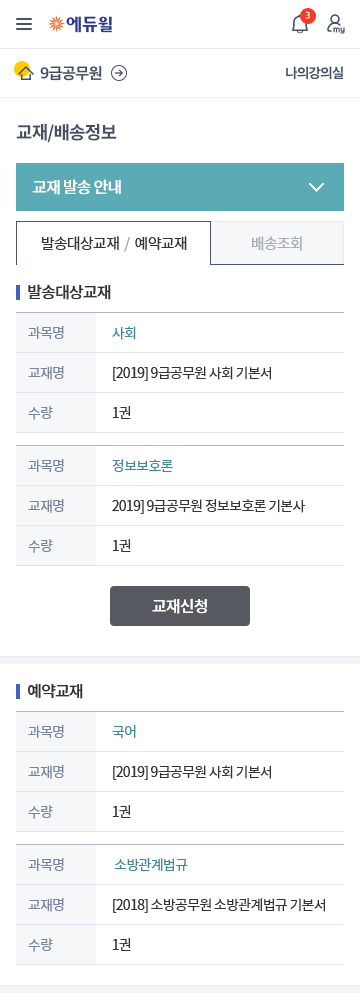
<style>
.page{position:relative;width:360px;height:993px;background:#ffffff}
.page>*{position:absolute;margin:0}
.t1{font:18px "NotoSansCJKkr-Bold";letter-spacing:-0.05em;color:#454f63}
.t2{font:16px "NotoSansCJKkr-Medium";letter-spacing:-0.05em;color:#ffffff}
.t3{font:15px "NotoSansCJKkr-Regular";letter-spacing:-0.05em;color:#333333}
.t4{font:15px "NotoSansCJKkr-Regular";letter-spacing:-0.05em;color:#aaaaaa}
.t5{font:15px "NotoSansCJKkr-Regular";letter-spacing:-0.05em;color:#a4acb5}
.t6{font:16px "NotoSansCJKkr-Medium";letter-spacing:-0.05em;color:#333333}
.t7{font:14px/40px "NotoSansCJKkr-Regular";letter-spacing:-0.05em;color:#78849e}
.t8{font:14px/40px "NotoSansCJKkr-Regular";letter-spacing:-0.05em;color:#333333}
.t9{font:14px/40px "NotoSansCJKkr-Regular";letter-spacing:-0.05em;color:#3f8b95}
</style>
<div class="page">
<p class="t1" style="left:16px;top:123px;width:101px;height:20px">교재/배송정보</p>
<p class="t2" style="left:32px;top:179px;width:89px;height:16px">교재 발송 안내</p>
<p class="t3" style="left:42px;top:236px;width:145px;height:16px">발송대상교재  <span class="t4">/</span>  예약교재</p>
<p class="t5" style="left:252px;top:236px;width:50px;height:15px">배송조회</p>
<p class="t6" style="left:28px;top:284px;width:83px;height:16px">발송대상교재</p>
<p class="t7" style="left:28px;top:326px;width:36px;height:94px">과목명<br>교재명<br>수량</p>
<p class="t8" style="left:112px;top:326px;width:159px;height:93px"><span class="t9">사회</span><br>[2019] 9급공무원 사회 기본서<br>1권</p>
<p class="t7" style="left:28px;top:459px;width:36px;height:94px">과목명<br>교재명<br>수량</p>
<p class="t8" style="left:112px;top:459px;width:193px;height:93px"><span class="t9">정보보호론<br></span>2019] 9급공무원 정보보호론 기본사<br>1권</p>
<p class="t2" style="left:152px;top:598px;width:55px;height:16px">교재신청</p>
<p class="t6" style="left:28px;top:684px;width:55px;height:15px">예약교재</p>
<p class="t7" style="left:28px;top:725px;width:36px;height:94px">과목명<br>교재명<br>수량</p>
<p class="t8" style="left:112px;top:725px;width:159px;height:93px"><span class="t9">국어<br></span>[2019] 9급공무원 사회 기본서<br>1권</p>
<p class="t7" style="left:28px;top:858px;width:36px;height:94px">과목명<br>교재명<br>수량</p>
<p class="t8" style="left:112px;top:858px;width:213px;height:93px"><span class="t9"> 소방관계법규<br></span>[2018] 소방공무원 소방관계법규 기본서<br>1권</p>
</div>
